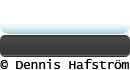
<style>
.page{position:relative;width:130px;height:70px;background:#ffffff}
.page>*{position:absolute;margin:0}
.t1{font:12.6px "LucidaConsole";color:#000000}
</style>
<div class="page">
<p class="t1" style="left:0px;top:59px;width:129px;height:10px">© Dennis Hafström</p>
</div>
